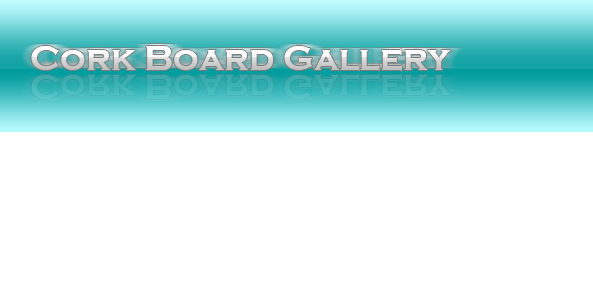
<style>
.page{position:relative;width:593px;height:300px;background:#ffffff}
.page>*{position:absolute;margin:0}
.t1{font:36px "CopperplateGothic-Bold"}
</style>
<div class="page">
<p class="t1" style="left:31px;top:46px;width:419px;height:25px">Cork Board Gallery</p>
</div>
